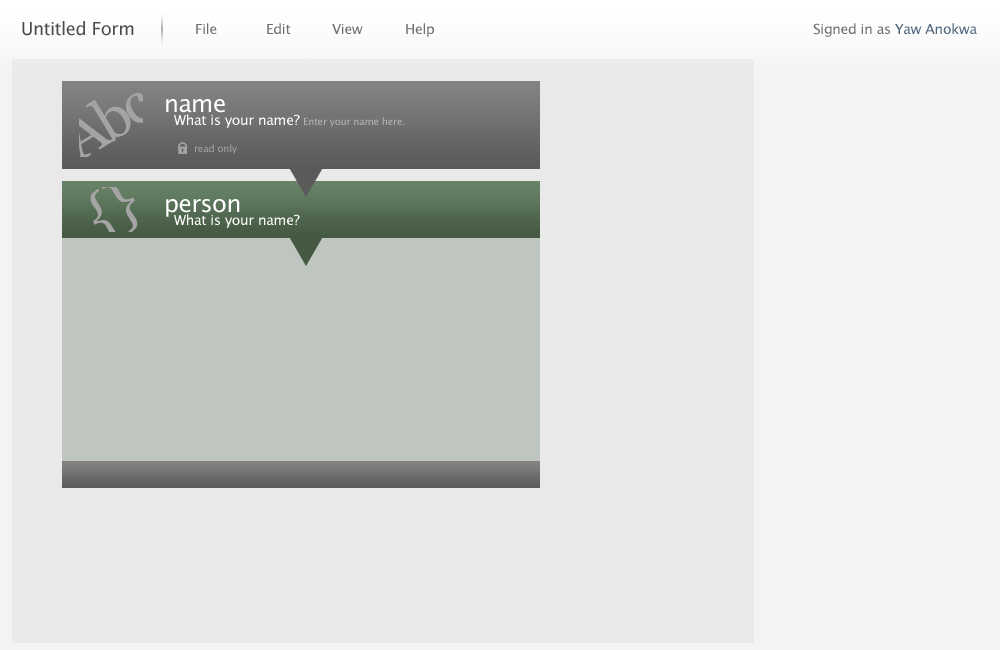
<style>
.page{position:relative;width:1000px;height:650px;background:#e9e9e9}
.page>*{position:absolute;margin:0}
.t1{font:18px "LucidaSansUnicode";letter-spacing:-0.025em;color:#4c4c4c}
.t2{font:14px "LucidaSansUnicode";letter-spacing:-0.025em;color:#6d6d6d}
.t3{font:14px "LucidaSansUnicode";letter-spacing:-0.025em;color:#4e647b}
.t4{font:59px "Georgia";letter-spacing:-0.075em;color:#a4a4a4}
.t5{font:24px "LucidaSansUnicode";letter-spacing:-0.025em;color:#ffffff}
.t6{font:14px "LucidaSansUnicode";letter-spacing:-0.025em;color:#ffffff}
.t7{font:10px "LucidaSansUnicode";letter-spacing:-0.025em;color:#b4b4b4}
.t8{font:10px "LucidaSansUnicode";letter-spacing:-0.025em;color:#a4a4a4}
.t9{font:59px "Georgia";letter-spacing:-0.005em;color:#a4a4a4}
</style>
<div class="page">
<p class="t1" style="left:22px;top:21px;width:112px;height:15px">Untitled Form</p>
<p class="t2" style="left:196px;top:23px;width:21px;height:11px">File</p>
<p class="t2" style="left:267px;top:23px;width:24px;height:11px">Edit</p>
<p class="t2" style="left:332px;top:24px;width:31px;height:10px">View</p>
<p class="t2" style="left:406px;top:23px;width:28px;height:14px">Help</p>
<p class="t2" style="left:813px;top:23px;width:164px;height:14px">Signed in as <span class="t3">Yaw Anokwa</span></p>
<p class="t4" style="left:73px;top:93px;width:81px;height:70px;rotate:-31deg">Abc</p>
<p class="t5" style="left:166px;top:99px;width:59px;height:14px">name</p>
<p class="t6" style="left:174px;top:114px;width:126px;height:14px">What is your name?</p>
<p class="t7" style="left:304px;top:117px;width:101px;height:10px">Enter your name here.</p>
<p class="t8" style="left:195px;top:144px;width:42px;height:10px">read only</p>
<p class="t9" style="left:90px;top:184px;width:48px;height:55px;rotate:-31deg">{}</p>
<p class="t5" style="left:166px;top:199px;width:74px;height:18px">person</p>
<p class="t6" style="left:174px;top:214px;width:126px;height:14px">What is your name?</p>
</div>
